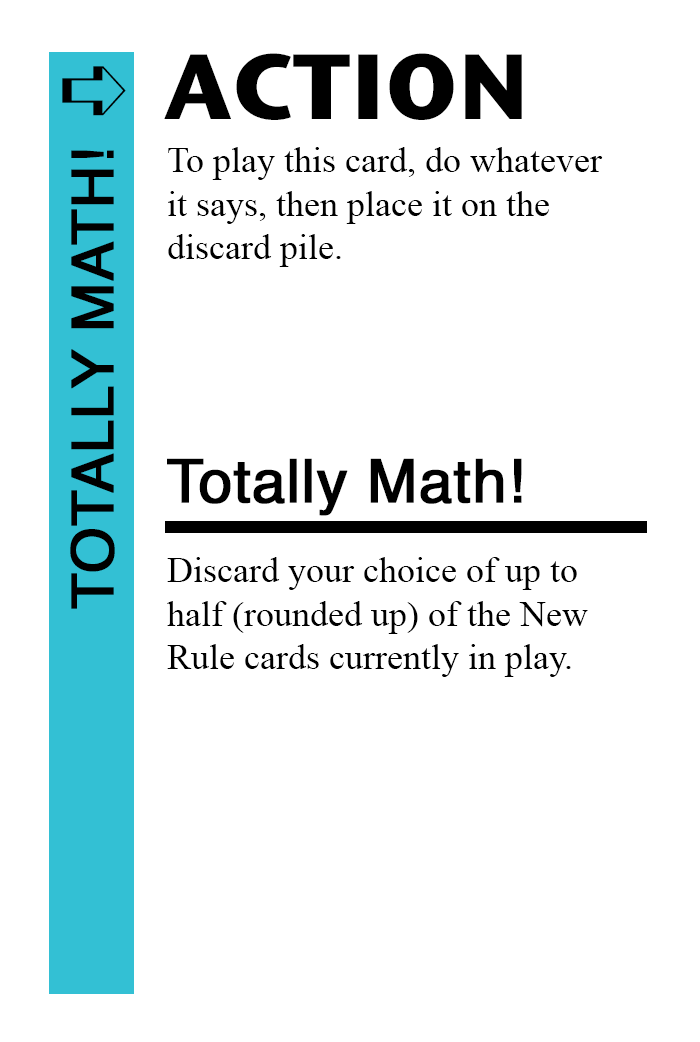
<style>
.page{position:relative;width:700px;height:1042px;background:#ffffff}
.page>*{position:absolute;margin:0}
.t1{font:92px "StoneSansITC-Bold";color:#000000}
.t2{font:82px "MS-Gothic";color:#000000}
.t3{font:58px "Helvetica";color:#000000;font-weight:bold}
.t4{font:36px "TimesNewRomanPSMT";color:#000000}
.t5{font:60px "Helvetica";color:#000000;font-weight:bold}
</style>
<div class="page">
<p class="t1" style="left:164px;top:53px;width:358px;height:67px">ACTION</p>
<p class="t2" style="left:62px;top:66px;width:64px;height:50px">➪</p>
<p class="t3" style="left:70px;top:150px;width:45px;height:459px;rotate:-90deg">TOTALLY MATH!</p>
<p class="t4" style="left:168px;top:147px;width:435px;height:120px">To play this card, do whatever<br>it says, then place it on the<br>discard pile.</p>
<p class="t5" style="left:167px;top:458px;width:355px;height:58px">Totally Math!</p>
<p class="t4" style="left:167px;top:557px;width:421px;height:120px">Discard your choice of up to<br>half (rounded up) of the New <br>Rule cards currently in play.</p>
</div>
